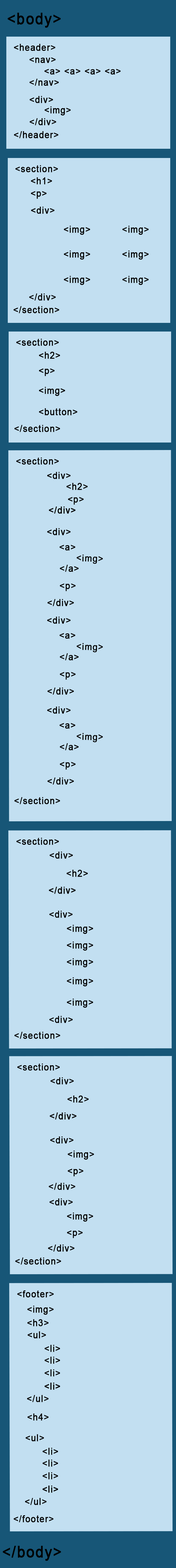
<style>
.page{position:relative;width:176px;height:1568px;background:#c2dff1}
.page>*{position:absolute;margin:0}
.t1{font:15.9px "ArialMT";letter-spacing:0.06em;color:#000000;font-weight:bold;scale:0.91 1}
.t2{font:9.5px "ArialMT";letter-spacing:0.06em;color:#000000;font-weight:bold;scale:0.9 1}
.t3{font:9.5px "ArialMT";letter-spacing:0.06em;color:#000000;font-weight:bold;scale:0.91 1}
.t4{font:9.6px "ArialMT";letter-spacing:0.06em;color:#000000;font-weight:bold;scale:0.9 1}
.t5{font:9.4px "ArialMT";letter-spacing:0.06em;color:#000000;font-weight:bold;scale:0.91 1}
</style>
<div class="page">
<p class="t1" style="left:7px;top:13px;width:54px;height:15px">&lt;body&gt;</p>
<p class="t2" style="left:14px;top:44px;width:42px;height:7px">&lt;header&gt;</p>
<p class="t2" style="left:29px;top:57px;width:27px;height:6px">&lt;nav&gt;</p>
<p class="t3" style="left:44px;top:69px;width:77px;height:6px">&lt;a&gt; &lt;a&gt; &lt;a&gt; &lt;a&gt;</p>
<p class="t2" style="left:29px;top:79px;width:30px;height:7px">&lt;/nav&gt;</p>
<p class="t3" style="left:30px;top:96px;width:23px;height:7px">&lt;div&gt;</p>
<p class="t3" style="left:45px;top:106px;width:26px;height:10px">&lt;img&gt;</p>
<p class="t3" style="left:30px;top:118px;width:27px;height:7px">&lt;/div&gt;</p>
<p class="t2" style="left:14px;top:131px;width:45px;height:7px">&lt;/header&gt;</p>
<p class="t2" style="left:15px;top:165px;width:43px;height:7px">&lt;section&gt;</p>
<p class="t2" style="left:31px;top:177px;width:21px;height:8px">&lt;h1&gt;</p>
<p class="t2" style="left:31px;top:191px;width:16px;height:8px">&lt;p&gt;</p>
<p class="t3" style="left:31px;top:207px;width:24px;height:7px">&lt;div&gt;</p>
<p class="t4" style="left:64px;top:226px;width:27px;height:9px">&lt;img&gt;</p>
<p class="t4" style="left:123px;top:226px;width:26px;height:9px">&lt;img&gt;</p>
<p class="t4" style="left:64px;top:251px;width:27px;height:9px">&lt;img&gt;</p>
<p class="t4" style="left:123px;top:251px;width:26px;height:9px">&lt;img&gt;</p>
<p class="t4" style="left:64px;top:276px;width:27px;height:9px">&lt;img&gt;</p>
<p class="t4" style="left:123px;top:276px;width:26px;height:9px">&lt;img&gt;</p>
<p class="t5" style="left:29px;top:293px;width:27px;height:8px">&lt;/div&gt;</p>
<p class="t3" style="left:14px;top:306px;width:45px;height:7px">&lt;/section&gt;</p>
<p class="t2" style="left:16px;top:339px;width:43px;height:7px">&lt;section&gt;</p>
<p class="t2" style="left:39px;top:352px;width:21px;height:7px">&lt;h2&gt;</p>
<p class="t2" style="left:39px;top:368px;width:16px;height:8px">&lt;p&gt;</p>
<p class="t2" style="left:39px;top:387px;width:26px;height:9px">&lt;img&gt;</p>
<p class="t2" style="left:39px;top:408px;width:39px;height:7px">&lt;button&gt;</p>
<p class="t3" style="left:14px;top:425px;width:46px;height:7px">&lt;/section&gt;</p>
<p class="t2" style="left:16px;top:458px;width:43px;height:7px">&lt;section&gt;</p>
<p class="t2" style="left:47px;top:472px;width:24px;height:7px">&lt;div&gt;</p>
<p class="t2" style="left:67px;top:483px;width:21px;height:7px">&lt;h2&gt;</p>
<p class="t2" style="left:68px;top:497px;width:16px;height:8px">&lt;p&gt;</p>
<p class="t2" style="left:47px;top:528px;width:24px;height:7px">&lt;div&gt;</p>
<p class="t3" style="left:60px;top:545px;width:16px;height:6px">&lt;a&gt;</p>
<p class="t3" style="left:77px;top:554px;width:26px;height:10px;rotate:2deg">&lt;img&gt;</p>
<p class="t3" style="left:60px;top:565px;width:19px;height:7px">&lt;/a&gt;</p>
<p class="t3" style="left:60px;top:583px;width:16px;height:8px">&lt;p&gt;</p>
<p class="t2" style="left:48px;top:599px;width:26px;height:7px">&lt;/div&gt;</p>
<p class="t2" style="left:47px;top:617px;width:24px;height:7px">&lt;div&gt;</p>
<p class="t2" style="left:60px;top:633px;width:16px;height:6px">&lt;a&gt;</p>
<p class="t2" style="left:60px;top:653px;width:19px;height:7px">&lt;/a&gt;</p>
<p class="t2" style="left:77px;top:643px;width:26px;height:9px;rotate:2deg">&lt;img&gt;</p>
<p class="t2" style="left:60px;top:672px;width:16px;height:8px">&lt;p&gt;</p>
<p class="t2" style="left:48px;top:688px;width:26px;height:7px">&lt;/div&gt;</p>
<p class="t2" style="left:47px;top:707px;width:24px;height:7px">&lt;div&gt;</p>
<p class="t2" style="left:60px;top:723px;width:16px;height:6px">&lt;a&gt;</p>
<p class="t2" style="left:77px;top:733px;width:26px;height:9px;rotate:2deg">&lt;img&gt;</p>
<p class="t2" style="left:60px;top:743px;width:19px;height:7px">&lt;/a&gt;</p>
<p class="t2" style="left:60px;top:762px;width:16px;height:8px">&lt;p&gt;</p>
<p class="t2" style="left:48px;top:778px;width:26px;height:7px">&lt;/div&gt;</p>
<p class="t3" style="left:14px;top:797px;width:46px;height:7px">&lt;/section&gt;</p>
<p class="t2" style="left:16px;top:838px;width:43px;height:7px">&lt;section&gt;</p>
<p class="t2" style="left:50px;top:852px;width:23px;height:7px">&lt;div&gt;</p>
<p class="t2" style="left:67px;top:870px;width:21px;height:7px">&lt;h2&gt;</p>
<p class="t2" style="left:49px;top:911px;width:24px;height:7px">&lt;div&gt;</p>
<p class="t3" style="left:67px;top:925px;width:26px;height:9px">&lt;img&gt;</p>
<p class="t3" style="left:67px;top:942px;width:26px;height:9px">&lt;img&gt;</p>
<p class="t3" style="left:67px;top:958px;width:26px;height:9px">&lt;img&gt;</p>
<p class="t3" style="left:67px;top:977px;width:26px;height:10px">&lt;img&gt;</p>
<p class="t3" style="left:67px;top:999px;width:26px;height:9px">&lt;img&gt;</p>
<p class="t3" style="left:49px;top:1016px;width:24px;height:7px">&lt;div&gt;</p>
<p class="t3" style="left:14px;top:1032px;width:47px;height:7px">&lt;/section&gt;</p>
<p class="t2" style="left:17px;top:1063px;width:43px;height:8px">&lt;section&gt;</p>
<p class="t2" style="left:50px;top:1077px;width:24px;height:8px">&lt;div&gt;</p>
<p class="t2" style="left:67px;top:1095px;width:22px;height:8px">&lt;h2&gt;</p>
<p class="t2" style="left:50px;top:1136px;width:24px;height:8px">&lt;div&gt;</p>
<p class="t3" style="left:68px;top:1151px;width:26px;height:9px">&lt;img&gt;</p>
<p class="t3" style="left:68px;top:1169px;width:16px;height:8px">&lt;p&gt;</p>
<p class="t3" style="left:49px;top:1183px;width:27px;height:7px">&lt;/div&gt;</p>
<p class="t2" style="left:50px;top:1198px;width:23px;height:8px">&lt;div&gt;</p>
<p class="t2" style="left:67px;top:1213px;width:26px;height:9px">&lt;img&gt;</p>
<p class="t2" style="left:67px;top:1230px;width:16px;height:8px">&lt;p&gt;</p>
<p class="t2" style="left:48px;top:1245px;width:27px;height:7px">&lt;/div&gt;</p>
<p class="t3" style="left:15px;top:1258px;width:46px;height:7px">&lt;/section&gt;</p>
<p class="t2" style="left:17px;top:1290px;width:37px;height:8px">&lt;footer&gt;</p>
<p class="t2" style="left:27px;top:1306px;width:27px;height:9px">&lt;img&gt;</p>
<p class="t2" style="left:27px;top:1319px;width:22px;height:7px">&lt;h3&gt;</p>
<p class="t2" style="left:28px;top:1331px;width:18px;height:8px">&lt;ul&gt;</p>
<p class="t3" style="left:45px;top:1345px;width:15px;height:7px">&lt;li&gt;</p>
<p class="t3" style="left:45px;top:1357px;width:15px;height:7px">&lt;li&gt;</p>
<p class="t3" style="left:45px;top:1369px;width:15px;height:8px">&lt;li&gt;</p>
<p class="t3" style="left:45px;top:1383px;width:15px;height:7px">&lt;li&gt;</p>
<p class="t3" style="left:45px;top:1383px;width:15px;height:7px">&lt;li&gt;</p>
<p class="t2" style="left:27px;top:1395px;width:22px;height:7px">&lt;/ul&gt;</p>
<p class="t2" style="left:27px;top:1413px;width:22px;height:8px">&lt;h4&gt;</p>
<p class="t2" style="left:26px;top:1434px;width:18px;height:7px">&lt;ul&gt;</p>
<p class="t3" style="left:43px;top:1448px;width:15px;height:7px">&lt;li&gt;</p>
<p class="t3" style="left:43px;top:1460px;width:15px;height:7px">&lt;li&gt;</p>
<p class="t3" style="left:43px;top:1472px;width:15px;height:7px">&lt;li&gt;</p>
<p class="t3" style="left:43px;top:1486px;width:15px;height:7px">&lt;li&gt;</p>
<p class="t3" style="left:43px;top:1486px;width:15px;height:7px">&lt;li&gt;</p>
<p class="t2" style="left:25px;top:1498px;width:22px;height:7px">&lt;/ul&gt;</p>
<p class="t3" style="left:14px;top:1515px;width:40px;height:7px">&lt;/footer&gt;</p>
<p class="t1" style="left:3px;top:1546px;width:58px;height:15px">&lt;/body&gt;</p>
</div>
